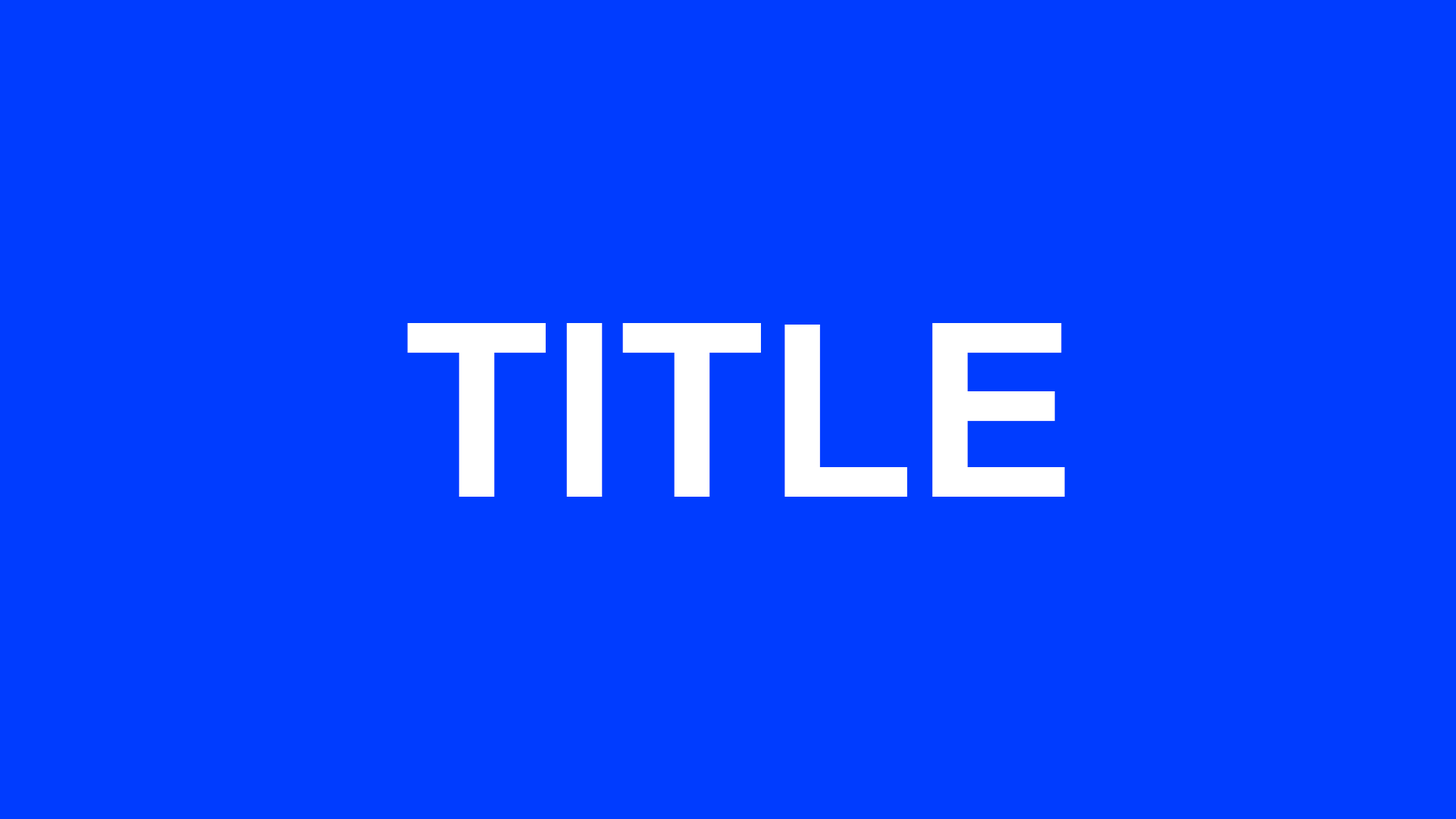
<style>
.page{position:relative;width:1456px;height:819px;background:#003cff}
.page>*{position:absolute;margin:0}
.t1{font:242.9px "Arial-BoldMT";color:#ffffff}
</style>
<div class="page">
<p class="t1" style="left:407px;top:323px;width:658px;height:174px">TITLE</p>
</div>
